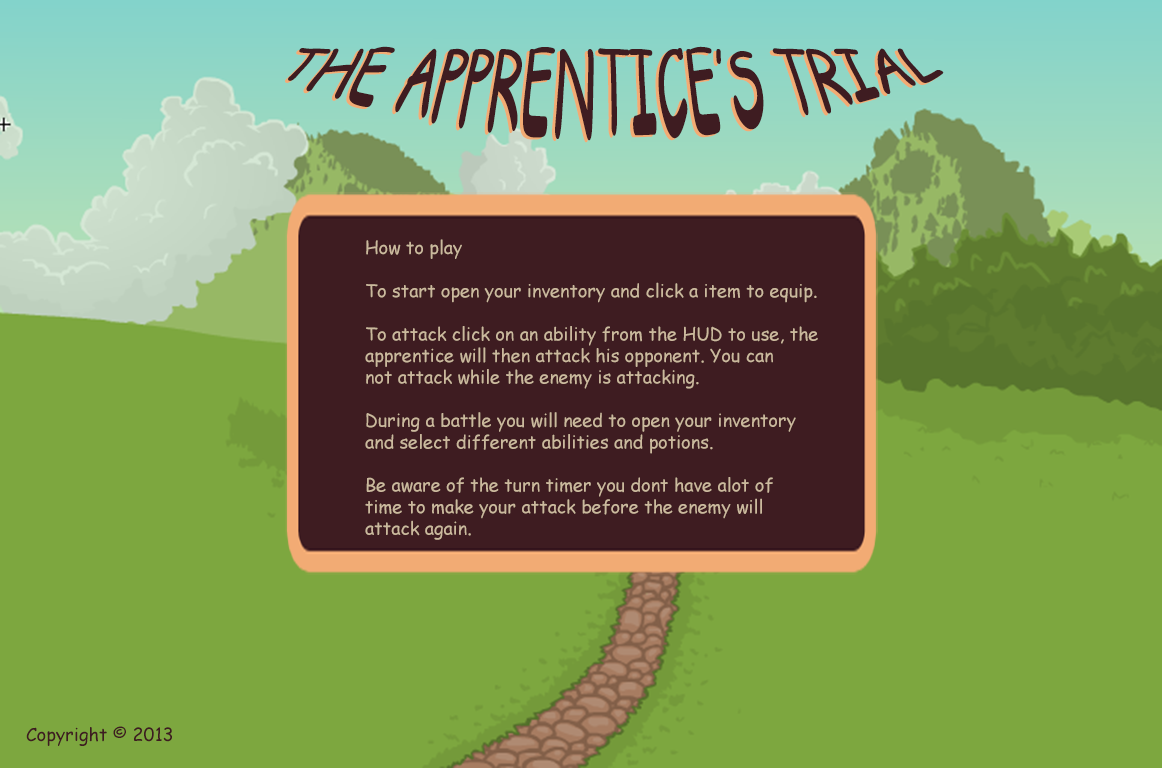
<style>
.page{position:relative;width:1162px;height:768px;background:#7da73f}
.page>*{position:absolute;margin:0}
.t1{font:48px "ComicSansMS"}
.t2{font:48px "ComicSansMS";color:#3e1c21}
.t3{font:18px "ComicSansMS";color:#cbb99d}
.t4{font:18px "ComicSansMS";color:#3e1c21}
</style>
<div class="page">
<p class="t1" style="left:285px;top:48px;width:656px;height:95px">THE APPRENTICE’S TRIAL</p>
<p class="t2" style="left:288px;top:46px;width:656px;height:95px">THE APPRENTICE’S TRIAL</p>
<p class="t3" style="left:365px;top:239px;width:453px;height:301px">How to play<br><br>To start open your inventory and click a item to equip.<br><br>To attack click on an ability from the HUD to use, the <br>apprentice will then attack his opponent. You can <br>not attack while the enemy is attacking.<br><br>During a battle you will need to open your inventory<br>and select different abilities and potions.<br><br>Be aware of the turn timer you dont have alot of <br>time to make your attack before the enemy will <br>attack again.</p>
<p class="t4" style="left:26px;top:726px;width:146px;height:20px">Copyright © 2013</p>
</div>
